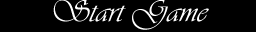
<style>
.page{position:relative;width:256px;height:32px;background:#000000}
.page>*{position:absolute;margin:0}
.t1{font:32px "Vivaldii";color:#ffffff;scale:1.04 1}
</style>
<div class="page">
<p class="t1" style="left:53px;top:0px;width:156px;height:30px">Start Game</p>
</div>
